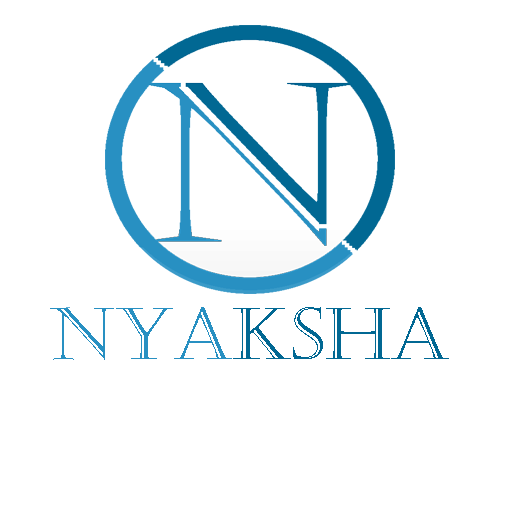
<style>
.page{position:relative;width:508px;height:508px;background:#ffffff}
.page>*{position:absolute;margin:0}
.t1{font:72px "Castellar";color:#016893}
.t2{font:72px "Castellar";color:#2890c2}
</style>
<div class="page">
<p class="t1" style="left:50px;top:307px;width:399px;height:53px"><span class="t2">NYA</span>KSHA</p>
</div>
